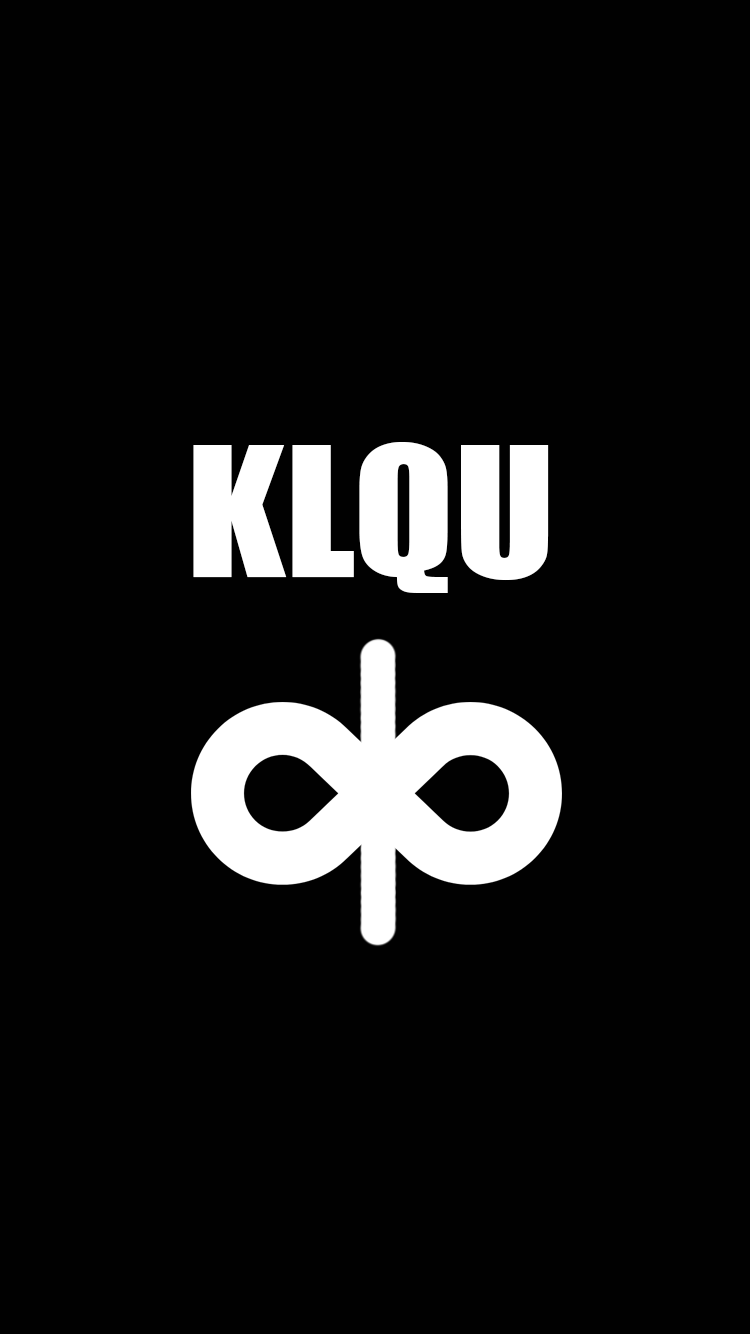
<style>
.page{position:relative;width:750px;height:1334px;background:#010101}
.page>*{position:absolute;margin:0}
.t1{font:167.4px "Impact";color:#ffffff;scale:1.1 1}
</style>
<div class="page">
<p class="t1" style="left:193px;top:442px;width:356px;height:151px">KLQU</p>
</div>
